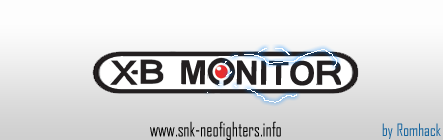
<style>
.page{position:relative;width:443px;height:140px}
.page>*{position:absolute;margin:0}
.t1{font:19.2px "AgencyFB-Reg";color:#000000;scale:0.86 1}
.t2{font:16.2px "AgencyFB-Reg";color:#19669f;scale:0.96 1}
</style>
<div class="page">
<p class="t1" style="left:150px;top:121px;width:131px;height:19px">www.snk-neofighters.info</p>
<p class="t2" style="left:382px;top:123px;width:59px;height:16px">by Romhack</p>
</div>
